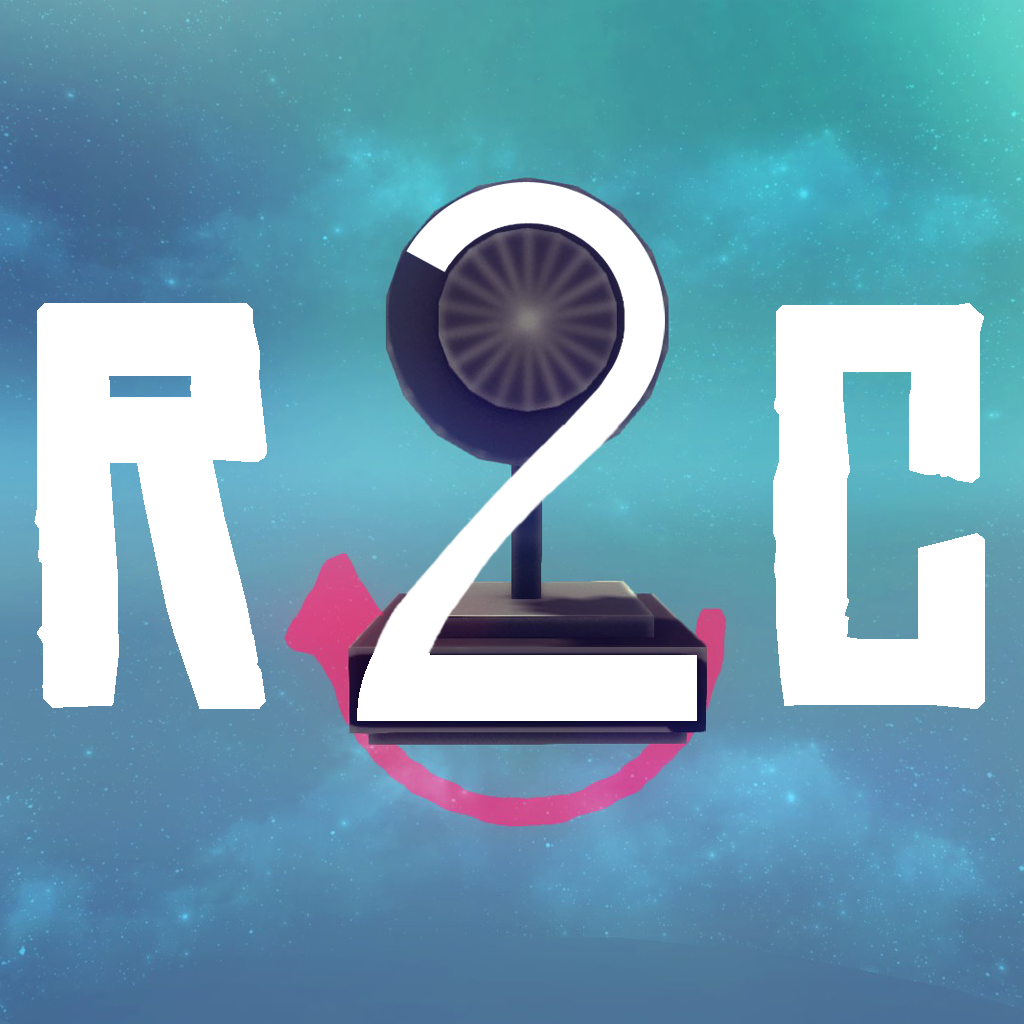
<style>
.page{position:relative;width:1024px;height:1024px}
.page>*{position:absolute;margin:0}
.t1{font:529.2px "ChineseRocksRg-Regular";color:#ffffff;font-weight:bold}
</style>
<div class="page">
<p class="t1" style="left:34px;top:303px;width:233px;height:406px">R</p>
<p class="t1" style="left:773px;top:303px;width:212px;height:406px">C</p>
</div>
